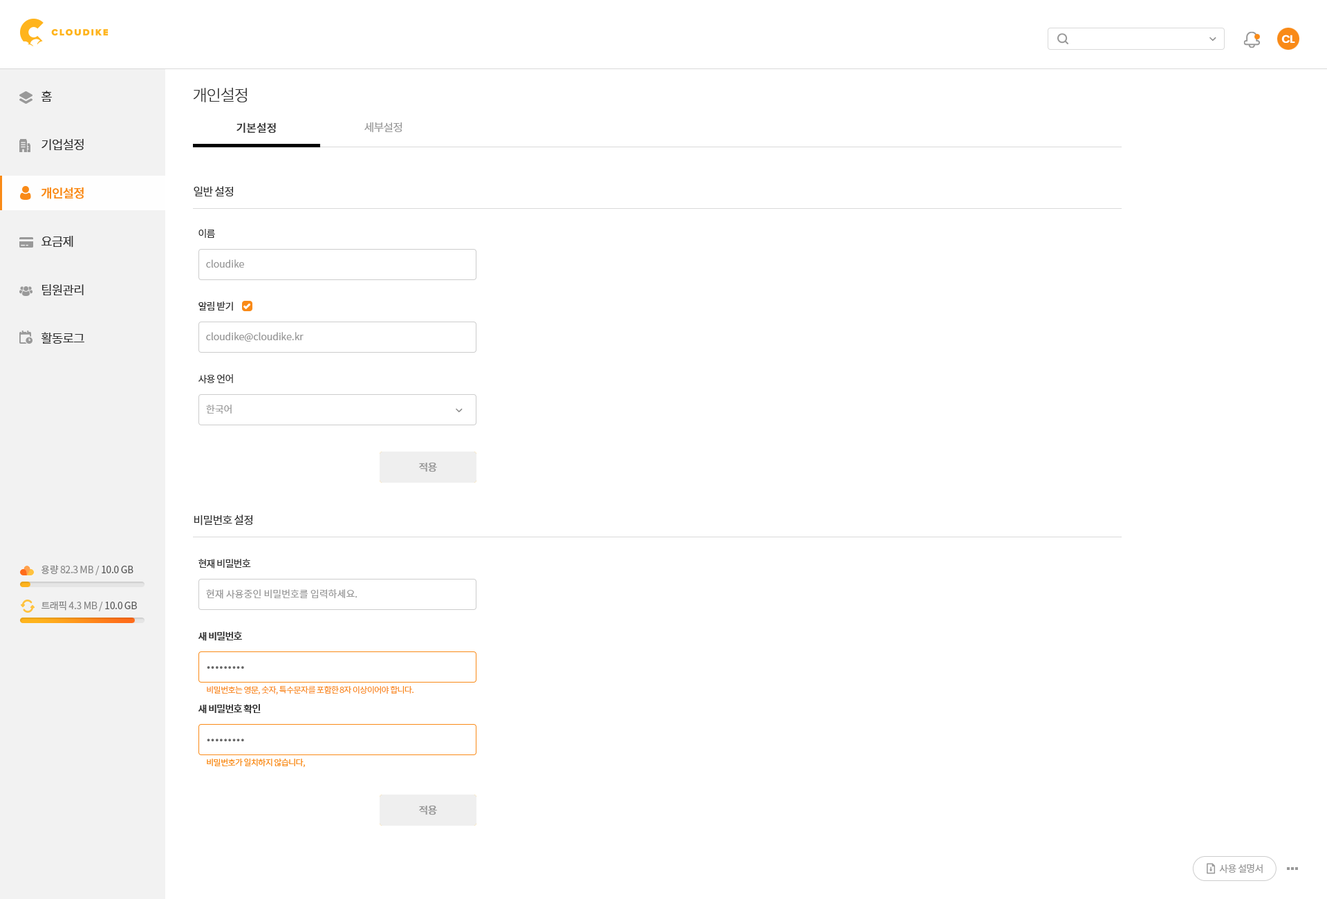
<style>
.page{position:relative;width:1327px;height:899px;background:#ffffff}
.page>*{position:absolute;margin:0}
.t1{font:11.1px "Poppins-SemiBold";letter-spacing:-0.05em;color:#ffffff}
.t2{font:15.9px "NotoSansCJKkr-Light";letter-spacing:-0.05em;color:#333333}
.t3{font:12.4px/48.4px "NotoSansCJKkr-DemiLight";letter-spacing:-0.05em;color:#333333}
.t4{font:12.4px/48.4px "NotoSansCJKkr-Medium";letter-spacing:-0.05em;color:#f98a17}
.t5{font:11.1px "NotoSansCJKkr-Medium";color:#333333}
.t6{font:11.1px "NotoSansCJKkr-DemiLight";letter-spacing:-0.05em;color:#999999}
.t7{font:11.1px "NotoSansCJKkr-Regular";letter-spacing:-0.05em;color:#333333}
.t8{font:9.7px "NotoSansCJKkr-Regular";letter-spacing:-0.05em;color:#333333}
.t9{font:9.7px "NotoSansCJKkr-DemiLight";color:#999999}
.t10{font:10.4px "NotoSansCJKkr-Medium";letter-spacing:-0.05em;color:#999999}
.t11{font:9.7px "NotoSansCJKkr-Regular";letter-spacing:-0.025em;color:#888888}
.t12{font:9.7px "NotoSansCJKkr-Regular";letter-spacing:-0.025em;color:#585858}
.t13{font:9.7px "NotoSansCJKkr-Medium";letter-spacing:-0.05em;color:#333333}
.t14{font:19.4px "NotoSansCJKkr-DemiLight";letter-spacing:-0.05em;color:#666666}
.t15{font:8.3px "NotoSansCJKkr-DemiLight";letter-spacing:-0.05em;color:#f98a17}
.t16{font:9.7px "NotoSansCJKkr-Regular";letter-spacing:-0.05em;color:#999999}
</style>
<div class="page">
<p class="t1" style="left:1281px;top:35px;width:14px;height:8px">CL</p>
<p class="t2" style="left:193px;top:87px;width:54px;height:15px">개인설정</p>
<p class="t3" style="left:41px;top:91px;width:43px;height:253px">홈<br>기업설정<br><span class="t4">개인설정<br></span>요금제<br>팀원관리<br>활동로그</p>
<p class="t5" style="left:236px;top:122px;width:40px;height:11px">기본설정</p>
<p class="t6" style="left:364px;top:122px;width:38px;height:11px">세부설정</p>
<p class="t7" style="left:194px;top:186px;width:39px;height:10px">일반 설정</p>
<p class="t8" style="left:198px;top:229px;width:17px;height:9px">이름</p>
<p class="t9" style="left:206px;top:259px;width:38px;height:9px">cloudike</p>
<p class="t8" style="left:198px;top:301px;width:35px;height:10px">알림 받기</p>
<p class="t9" style="left:206px;top:332px;width:98px;height:10px">cloudike@cloudike.kr</p>
<p class="t8" style="left:198px;top:374px;width:35px;height:10px">사용 언어</p>
<p class="t9" style="left:206px;top:404px;width:26px;height:10px">한국어</p>
<p class="t10" style="left:419px;top:462px;width:18px;height:10px">적용</p>
<p class="t10" style="left:419px;top:462px;width:18px;height:10px">적용</p>
<p class="t7" style="left:194px;top:514px;width:58px;height:11px">비밀번호 설정</p>
<p class="t11" style="left:41px;top:565px;width:92px;height:10px">용량 82.3 MB / <span class="t12">10.0 GB</span></p>
<p class="t8" style="left:198px;top:559px;width:53px;height:9px">현재 비밀번호</p>
<p class="t9" style="left:206px;top:589px;width:151px;height:10px">현재 사용중인 비밀번호를 입력하세요.</p>
<p class="t11" style="left:41px;top:601px;width:96px;height:10px">트래픽 4.3 MB / <span class="t12">10.0 GB</span></p>
<p class="t13" style="left:198px;top:631px;width:44px;height:10px">새 비밀번호</p>
<p class="t14" style="left:207px;top:666px;width:37px;height:3px">.........</p>
<p class="t15" style="left:207px;top:685px;width:206px;height:10px">비밀번호는 영문, 숫자, 특수문자를 포함한 8자 이상이어야 합니다.</p>
<p class="t13" style="left:198px;top:704px;width:63px;height:9px">새 비밀번호 확인</p>
<p class="t14" style="left:207px;top:738px;width:37px;height:3px">.........</p>
<p class="t15" style="left:207px;top:758px;width:98px;height:9px">비밀번호가 일치하지 않습니다,</p>
<p class="t10" style="left:419px;top:805px;width:18px;height:10px">적용</p>
<p class="t10" style="left:419px;top:805px;width:18px;height:10px">적용</p>
<p class="t16" style="left:1219px;top:864px;width:43px;height:9px">사용 설명서</p>
</div>
